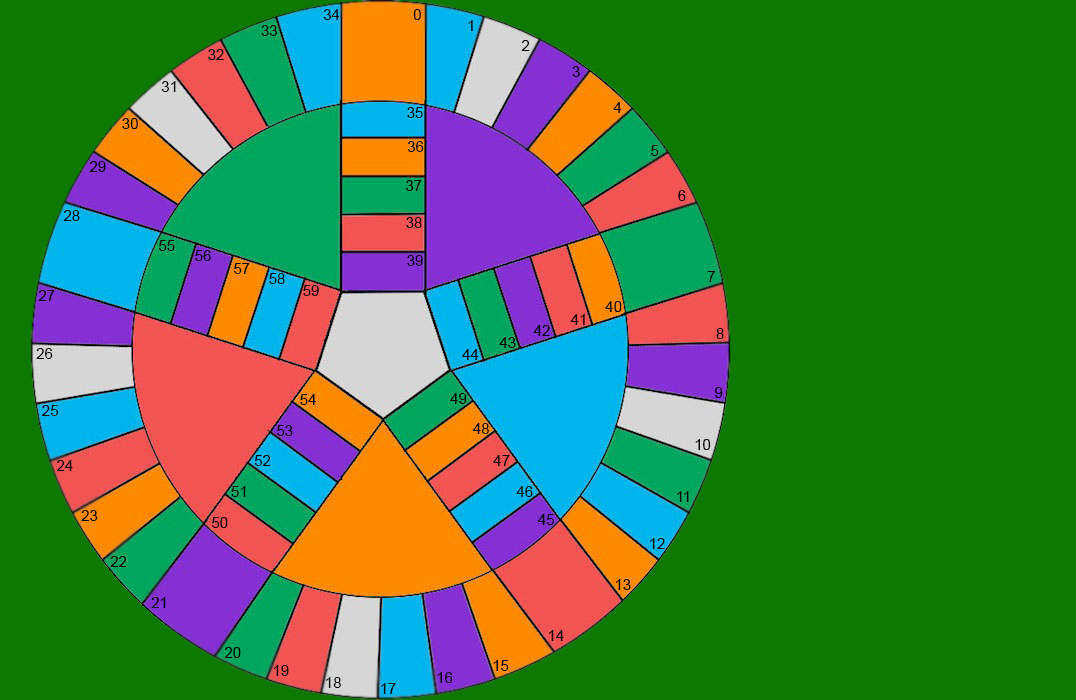
<style>
.page{position:relative;width:1076px;height:700px;background:#0d7901}
.page>*{position:absolute;margin:0}
.t1{font:14.9px "ArialMT";color:#000000}
</style>
<div class="page">
<p class="t1" style="left:323px;top:9px;width:17px;height:11px">34</p>
<p class="t1" style="left:413px;top:9px;width:8px;height:11px">0</p>
<p class="t1" style="left:261px;top:25px;width:16px;height:11px">33</p>
<p class="t1" style="left:468px;top:20px;width:5px;height:11px">1</p>
<p class="t1" style="left:521px;top:40px;width:9px;height:11px">2</p>
<p class="t1" style="left:208px;top:49px;width:16px;height:11px">32</p>
<p class="t1" style="left:572px;top:66px;width:8px;height:11px">3</p>
<p class="t1" style="left:161px;top:81px;width:15px;height:11px">31</p>
<p class="t1" style="left:613px;top:102px;width:9px;height:11px">4</p>
<p class="t1" style="left:407px;top:107px;width:16px;height:11px">35</p>
<p class="t1" style="left:122px;top:118px;width:16px;height:11px">30</p>
<p class="t1" style="left:407px;top:141px;width:17px;height:11px">36</p>
<p class="t1" style="left:651px;top:145px;width:8px;height:11px">5</p>
<p class="t1" style="left:89px;top:161px;width:17px;height:11px">29</p>
<p class="t1" style="left:406px;top:180px;width:16px;height:11px">37</p>
<p class="t1" style="left:678px;top:190px;width:8px;height:11px">6</p>
<p class="t1" style="left:63px;top:210px;width:17px;height:11px">28</p>
<p class="t1" style="left:406px;top:217px;width:16px;height:11px">38</p>
<p class="t1" style="left:159px;top:240px;width:16px;height:11px">55</p>
<p class="t1" style="left:195px;top:250px;width:16px;height:11px">56</p>
<p class="t1" style="left:407px;top:255px;width:16px;height:11px">39</p>
<p class="t1" style="left:234px;top:263px;width:16px;height:11px">57</p>
<p class="t1" style="left:269px;top:273px;width:16px;height:11px">58</p>
<p class="t1" style="left:707px;top:271px;width:8px;height:11px">7</p>
<p class="t1" style="left:38px;top:290px;width:17px;height:11px">27</p>
<p class="t1" style="left:303px;top:285px;width:16px;height:11px">59</p>
<p class="t1" style="left:605px;top:301px;width:17px;height:11px">40</p>
<p class="t1" style="left:570px;top:314px;width:15px;height:11px">41</p>
<p class="t1" style="left:533px;top:325px;width:17px;height:11px">42</p>
<p class="t1" style="left:716px;top:328px;width:8px;height:11px">8</p>
<p class="t1" style="left:499px;top:337px;width:17px;height:11px">43</p>
<p class="t1" style="left:36px;top:348px;width:17px;height:11px">26</p>
<p class="t1" style="left:462px;top:349px;width:17px;height:11px">44</p>
<p class="t1" style="left:715px;top:387px;width:8px;height:11px">9</p>
<p class="t1" style="left:300px;top:394px;width:16px;height:11px">54</p>
<p class="t1" style="left:450px;top:393px;width:17px;height:11px">49</p>
<p class="t1" style="left:42px;top:405px;width:16px;height:11px">25</p>
<p class="t1" style="left:277px;top:425px;width:16px;height:11px">53</p>
<p class="t1" style="left:473px;top:423px;width:16px;height:11px">48</p>
<p class="t1" style="left:695px;top:439px;width:16px;height:11px">10</p>
<p class="t1" style="left:56px;top:460px;width:17px;height:11px">24</p>
<p class="t1" style="left:254px;top:455px;width:17px;height:11px">52</p>
<p class="t1" style="left:493px;top:455px;width:17px;height:11px">47</p>
<p class="t1" style="left:231px;top:486px;width:15px;height:11px">51</p>
<p class="t1" style="left:516px;top:486px;width:17px;height:11px">46</p>
<p class="t1" style="left:677px;top:491px;width:12px;height:11px">11</p>
<p class="t1" style="left:81px;top:510px;width:17px;height:11px">23</p>
<p class="t1" style="left:212px;top:517px;width:16px;height:11px">50</p>
<p class="t1" style="left:538px;top:514px;width:16px;height:11px">45</p>
<p class="t1" style="left:650px;top:538px;width:15px;height:11px">12</p>
<p class="t1" style="left:110px;top:556px;width:17px;height:11px">22</p>
<p class="t1" style="left:616px;top:579px;width:15px;height:11px">13</p>
<p class="t1" style="left:151px;top:597px;width:15px;height:11px">21</p>
<p class="t1" style="left:549px;top:630px;width:15px;height:11px">14</p>
<p class="t1" style="left:224px;top:647px;width:17px;height:11px">20</p>
<p class="t1" style="left:274px;top:665px;width:15px;height:11px">19</p>
<p class="t1" style="left:493px;top:660px;width:16px;height:11px">15</p>
<p class="t1" style="left:326px;top:677px;width:15px;height:11px">18</p>
<p class="t1" style="left:437px;top:672px;width:16px;height:11px">16</p>
<p class="t1" style="left:381px;top:683px;width:15px;height:11px">17</p>
</div>
